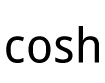
<style>
.page{position:relative;width:105px;height:83px;background:#ffffff}
.page>*{position:absolute;margin:0}
.t1{font:47.9px "DroidSans";color:#000000}
</style>
<div class="page">
<p class="t1" style="left:6px;top:26px;width:93px;height:37px">cosh</p>
</div>
